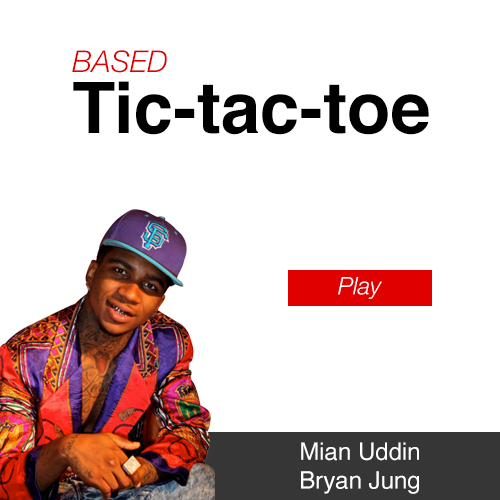
<style>
.page{position:relative;width:500px;height:500px;background:#ffffff}
.page>*{position:absolute;margin:0}
.t1{font:30px "HelveticaNeue-LightItalic";color:#e10101}
.t2{font:71px "Helvetica-Bold";color:#000000}
.t3{font:24px "HelveticaNeue-LightItalic";color:#ffffff}
.t4{font:24px "Helvetica";color:#ffffff}
</style>
<div class="page">
<p class="t1" style="left:72px;top:50px;width:95px;height:23px">BASED</p>
<p class="t2" style="left:73px;top:81px;width:356px;height:54px">Tic-tac-toe</p>
<p class="t3" style="left:338px;top:277px;width:44px;height:22px">Play</p>
<p class="t4" style="left:301px;top:442px;width:118px;height:52px">Mian Uddin<br>Bryan Jung</p>
</div>
